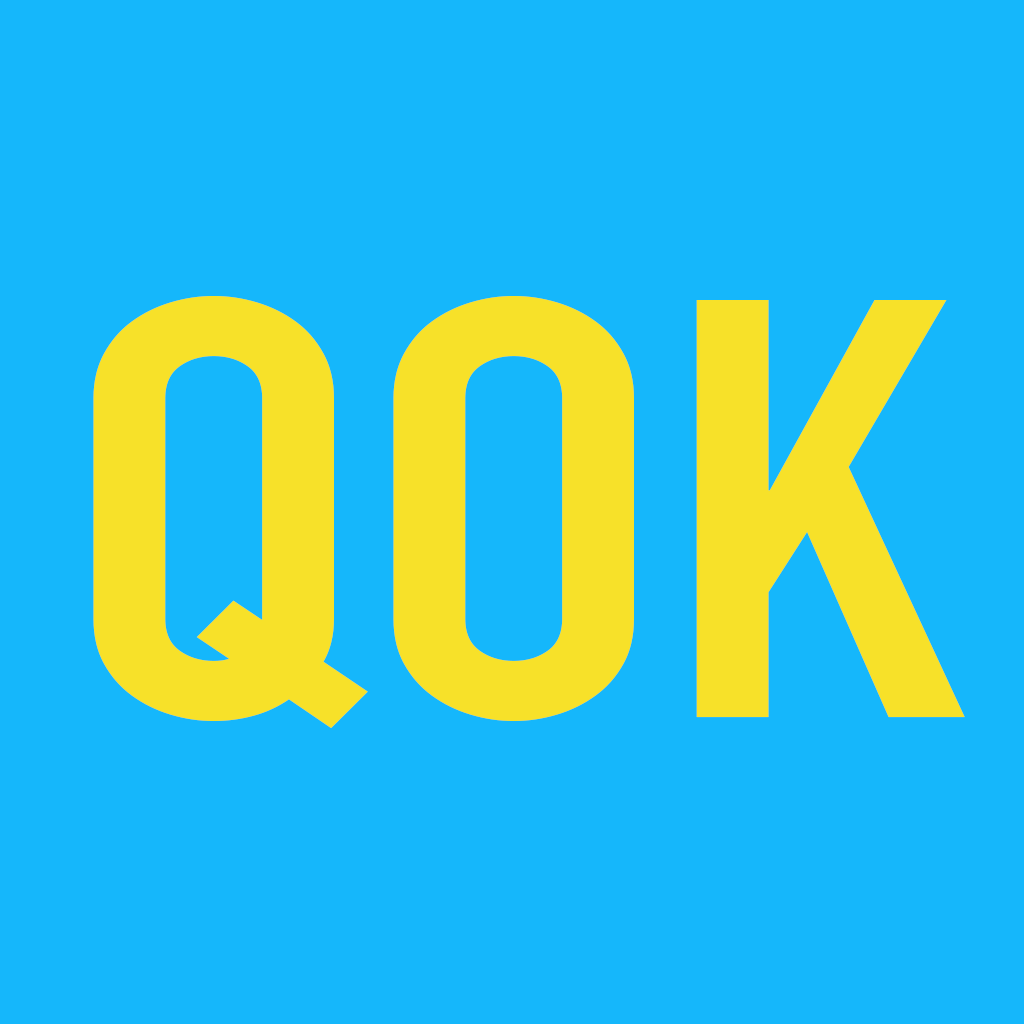
<style>
.page{position:relative;width:1024px;height:1024px;background:#15b7fb}
.page>*{position:absolute;margin:0}
.t1{font:586px "DINCondensed-Bold";color:#f7e129;scale:1.2 1}
</style>
<div class="page">
<p class="t1" style="left:93px;top:296px;width:872px;height:433px">QOK</p>
</div>
